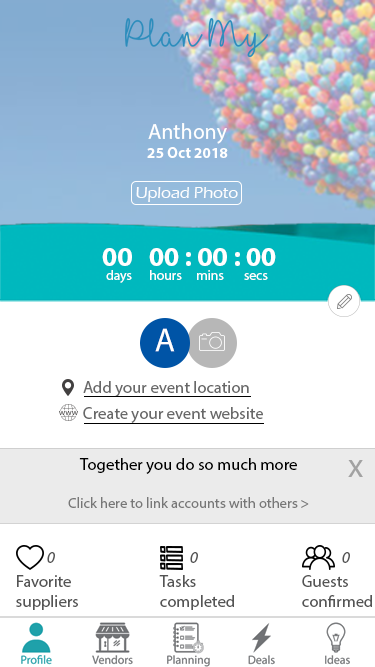
<style>
.page{position:relative;width:375px;height:667px;background:#ffffff}
.page>*{position:absolute;margin:0}
.t1{font:15.3px "MyriadPro-Bold";color:#ffffff}
.t2{font:21.9px "MyriadPro-Regular";color:#ffffff}
.t3{font:16.7px "ErasITC-Medium";color:#ffffff}
.t4{font:27.3px "MyriadPro-Bold";color:#ffffff}
.t5{font:13.6px "MyriadPro-Regular";color:#ffffff}
.t6{font:33.3px "MyriadPro-Regular";color:#ffffff}
.t7{font:16.7px "MyriadPro-Regular";color:#686868}
.t8{font:14.6px "MyriadPro-Regular";color:#777777}
.t9{font:16.7px "MyriadPro-Regular";color:#000000}
.t10{font:33.3px "MyriadPro-Regular";color:#a2a2a2}
.t11{font:16.7px "MyriadPro-It";color:#545454}
.t12{font:16.7px "MyriadPro-Regular";color:#545454}
</style>
<div class="page">
<p class="t1" style="left:147px;top:123px;width:81px;height:35px;text-align:center"><span class="t2">Anthony<br></span>25 Oct 2018</p>
<p class="t3" style="left:136px;top:187px;width:102px;height:15px">Upload Photo</p>
<p class="t4" style="left:102px;top:248px;width:174px;height:18px">00   00 : 00 : 00</p>
<p class="t5" style="left:106px;top:270px;width:162px;height:13px">days      hours     mins       secs</p>
<p class="t6" style="left:155px;top:328px;width:20px;height:24px">A</p>
<p class="t7" style="left:83px;top:381px;width:166px;height:16px">Add your event location</p>
<p class="t7" style="left:83px;top:407px;width:180px;height:16px">Create your event website</p>
<p class="t8" style="left:68px;top:458px;width:241px;height:50px;text-align:center"><span class="t9">Together you do so much more<br><br></span>Click here to link accounts with others &gt;</p>
<p class="t10" style="left:348px;top:460px;width:15px;height:17px">x</p>
<p class="t11" style="left:47px;top:552px;width:8px;height:11px">0</p>
<p class="t11" style="left:190px;top:552px;width:8px;height:11px">0</p>
<p class="t11" style="left:342px;top:552px;width:8px;height:11px">0</p>
<p class="t12" style="left:16px;top:575px;width:62px;height:35px">Favorite<br>suppliers</p>
<p class="t12" style="left:159px;top:575px;width:75px;height:35px">Tasks<br>completed</p>
<p class="t12" style="left:302px;top:575px;width:70px;height:32px">Guests<br>confirmed</p>
</div>
